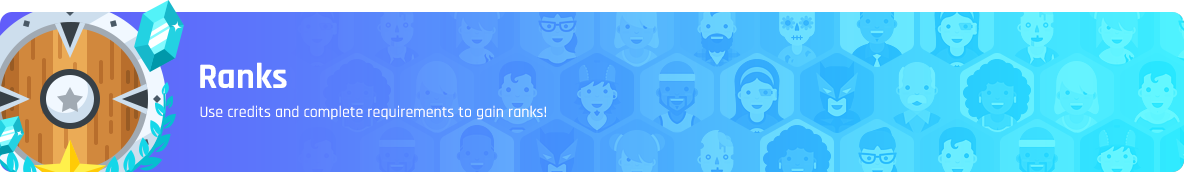
<style>
.page{position:relative;width:1184px;height:172px}
.page>*{position:absolute;margin:0}
.t1{font:36px "Rajdhani-Bold";color:#ffffff}
.t2{font:16px "Rajdhani-Medium";color:#ffffff}
</style>
<div class="page">
<p class="t1" style="left:200px;top:62px;width:87px;height:26px">Ranks</p>
<p class="t2" style="left:200px;top:105px;width:346px;height:15px">Use credits and complete requirements to gain ranks!</p>
</div>
